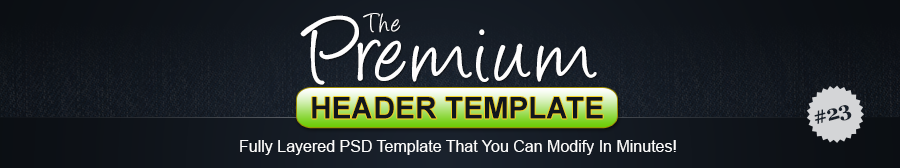
<style>
.page{position:relative;width:900px;height:168px}
.page>*{position:absolute;margin:0}
.t1{font:100px "Angelina";color:#ffffff}
.t2{font:30px "Angelina";color:#ffffff}
.t3{font:30px "Arial-BoldMT";color:#11161d;text-transform:uppercase}
.t4{font:21px "Georgia-Bold";letter-spacing:-0.05em;color:#19212b}
.t5{font:16px "ArialMT";color:#fcfcfc}
</style>
<div class="page">
<p class="t1" style="left:300px;top:15px;width:297px;height:70px">Premium</p>
<p class="t2" style="left:363px;top:13px;width:38px;height:20px">The</p>
<p class="t3" style="left:312px;top:97px;width:291px;height:22px">Header Template</p>
<p class="t4" style="left:814px;top:105px;width:38px;height:19px;rotate:-15deg">#23</p>
<p class="t5" style="left:240px;top:140px;width:436px;height:15px">Fully Layered PSD Template That You Can Modify In Minutes!</p>
</div>
